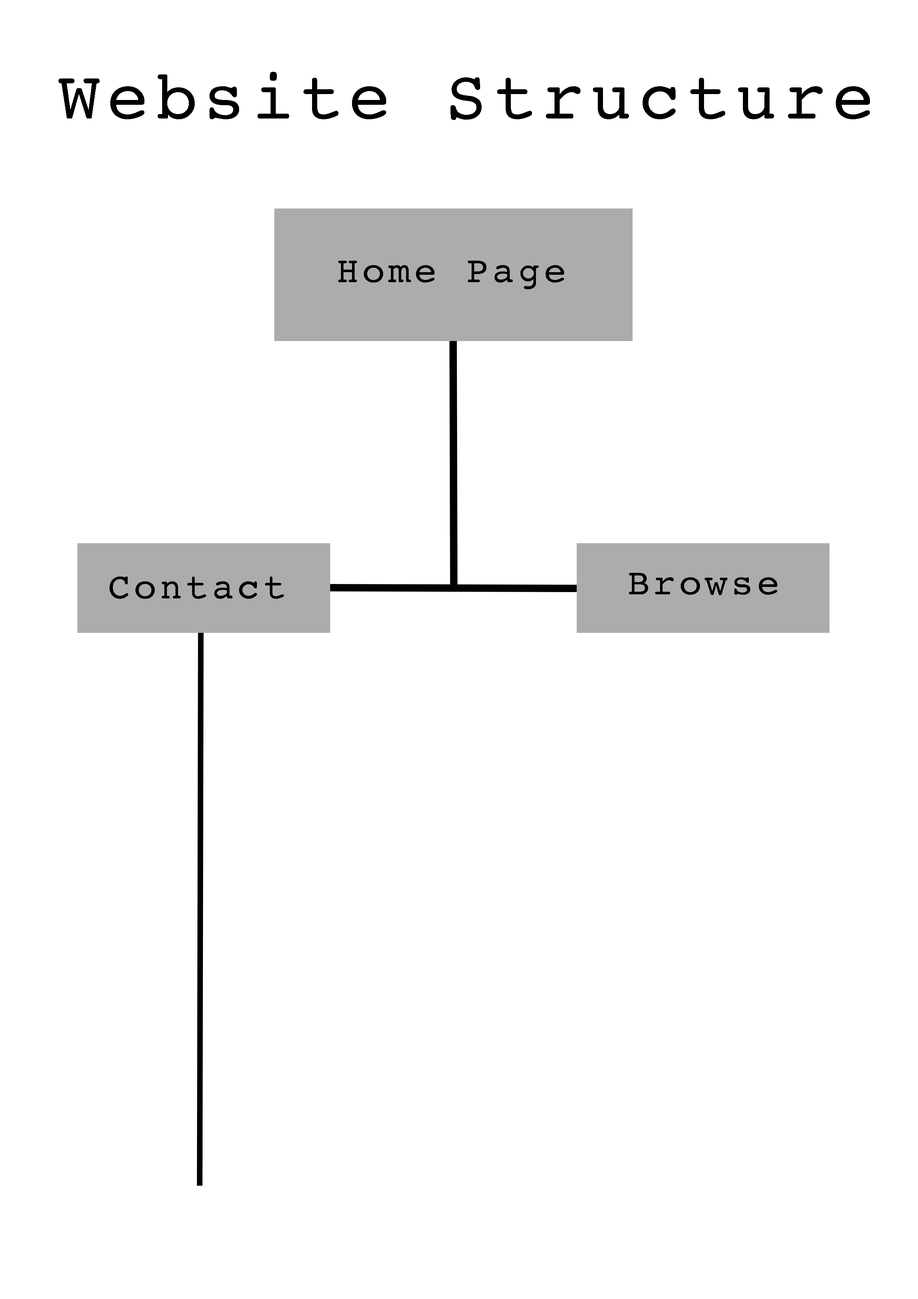
<style>
.page{position:relative;width:918px;height:1299px;background:#ffffff}
.page>*{position:absolute;margin:0}
.t1{font:69.1px "Courier";letter-spacing:0.1em;color:#000000}
.t2{font:37px "Courier";letter-spacing:0.1em;color:#000000}
</style>
<div class="page">
<p class="t1" style="left:58px;top:72px;width:812px;height:48px">Website Structure</p>
<p class="t2" style="left:338px;top:261px;width:226px;height:28px">Home Page</p>
<p class="t2" style="left:110px;top:576px;width:174px;height:23px">Contact</p>
<p class="t2" style="left:629px;top:573px;width:148px;height:22px">Browse</p>
</div>
